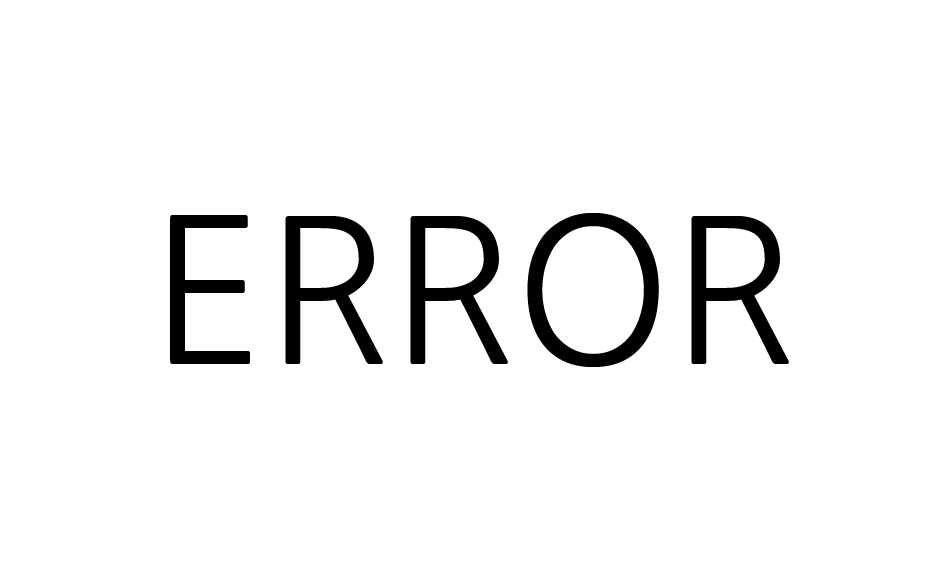
<style>
.page{position:relative;width:944px;height:585px;background:#ffffff}
.page>*{position:absolute;margin:0}
.t1{font:200px "NanumGothic";color:#000000}
</style>
<div class="page">
<p class="t1" style="left:170px;top:213px;width:619px;height:154px">ERROR</p>
</div>
